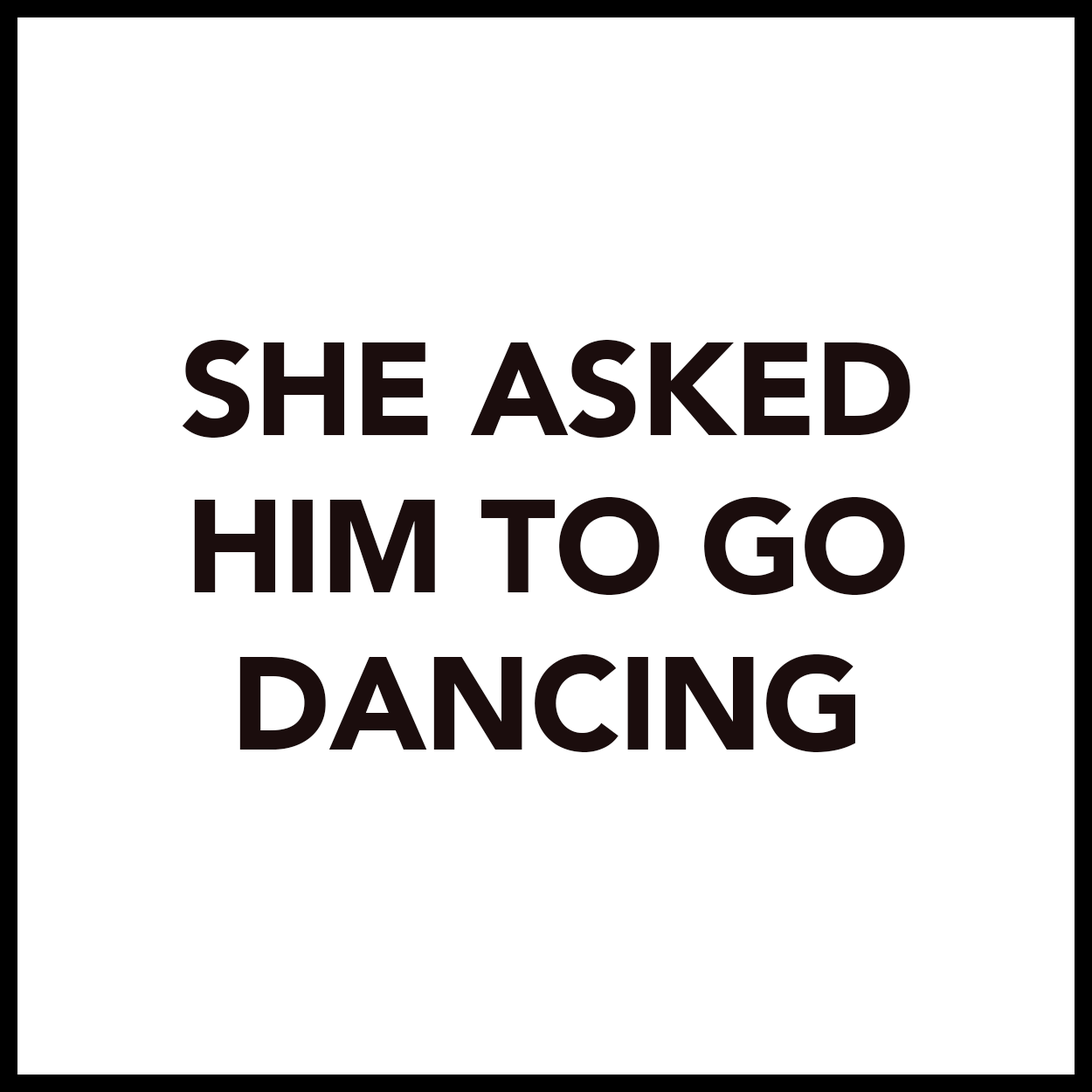
<style>
.page{position:relative;width:1092px;height:1092px;background:#ffffff}
.page>*{position:absolute;margin:0}
.t1{font:131px "Avenir-Black";letter-spacing:-0.01em;color:#1b0d0d}
</style>
<div class="page">
<p class="t1" style="left:182px;top:340px;width:728px;height:412px;text-align:center">SHE ASKED<br>HIM TO GO<br>DANCING</p>
</div>
